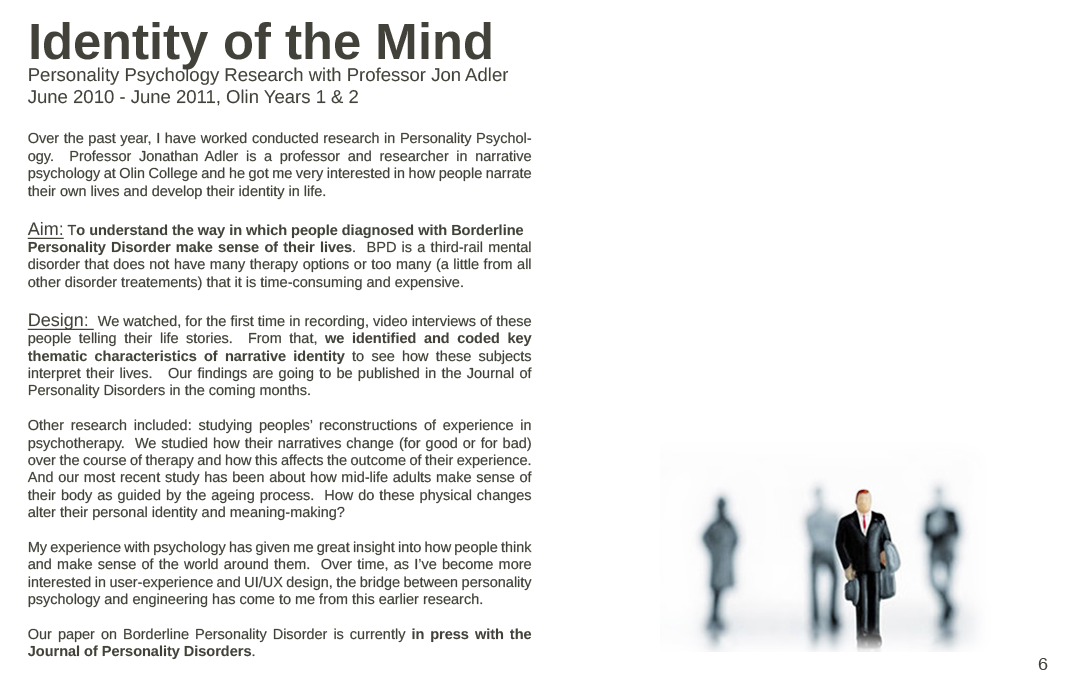
<style>
.page{position:relative;width:1080px;height:700px;background:#ffffff}
.page>*{position:absolute;margin:0}
.t1{font:18.5px "LiberationSans";color:#42423a}
.t2{font:50.9px "LiberationSans-Bold";color:#42423a}
.t3{font:14.5px "LiberationSans";color:#42423a}
.t4{font:18px "LiberationSans";color:#42423a;text-decoration:underline}
.t5{font:14.5px "LiberationSans-Bold";color:#42423a}
.t6{font:18px "LiberationSans";color:#42423a}
</style>
<div class="page">
<p class="t1" style="left:28px;top:22px;width:481px;height:84px;text-align:justify"><span class="t2">Identity of the Mind<br></span>Personality Psychology Research with Professor Jon Adler<br>June 2010 - June 2011, Olin Years 1 &amp; 2</p>
<p class="t3" style="left:27px;top:132px;width:505px;height:528px;text-align:justify">Over the past year, I have worked conducted research in Personality Psychology.  Professor Jonathan Adler is a professor and researcher in narrative psychology at Olin College and he got me very interested in how people narrate their own lives and develop their identity in life.  <br><br><span class="t4">Aim: </span>T<span class="t5">o understand the way in which people diagnosed with Borderline <br>Personality Disorder make sense of their lives</span>.  BPD is a third-rail mental disorder that does not have many therapy options or too many (a little from all other disorder treatements) that it is time-consuming and expensive.  <br><br><span class="t4">Design: </span> We watched, for the first time in recording, video interviews of these people telling their life stories.  From that, <span class="t5">we identified and coded key thematic characteristics of narrative identity</span> to see how these subjects interpret their lives.   Our findings are going to be published in the Journal of Personality Disorders in the coming months.<br><br>Other research included: studying peoples’ reconstructions of experience in psychotherapy.  We studied how their narratives change (for good or for bad) over the course of therapy and how this affects the outcome of their experience.  And our most recent study has been about how mid-life adults make sense of their body as guided by the ageing process.  How do these physical changes alter their personal identity and meaning-making?<br><br>My experience with psychology has given me great insight into how people think and make sense of the world around them.  Over time, as I’ve become more interested in user-experience and UI/UX design, the bridge between personality psychology and engineering has come to me from this earlier research.<br><br>Our paper on Borderline Personality Disorder is currently <span class="t5">in press with the Journal of Personality Disorders</span>.</p>
<p class="t6" style="left:1038px;top:658px;width:10px;height:12px">6</p>
</div>
